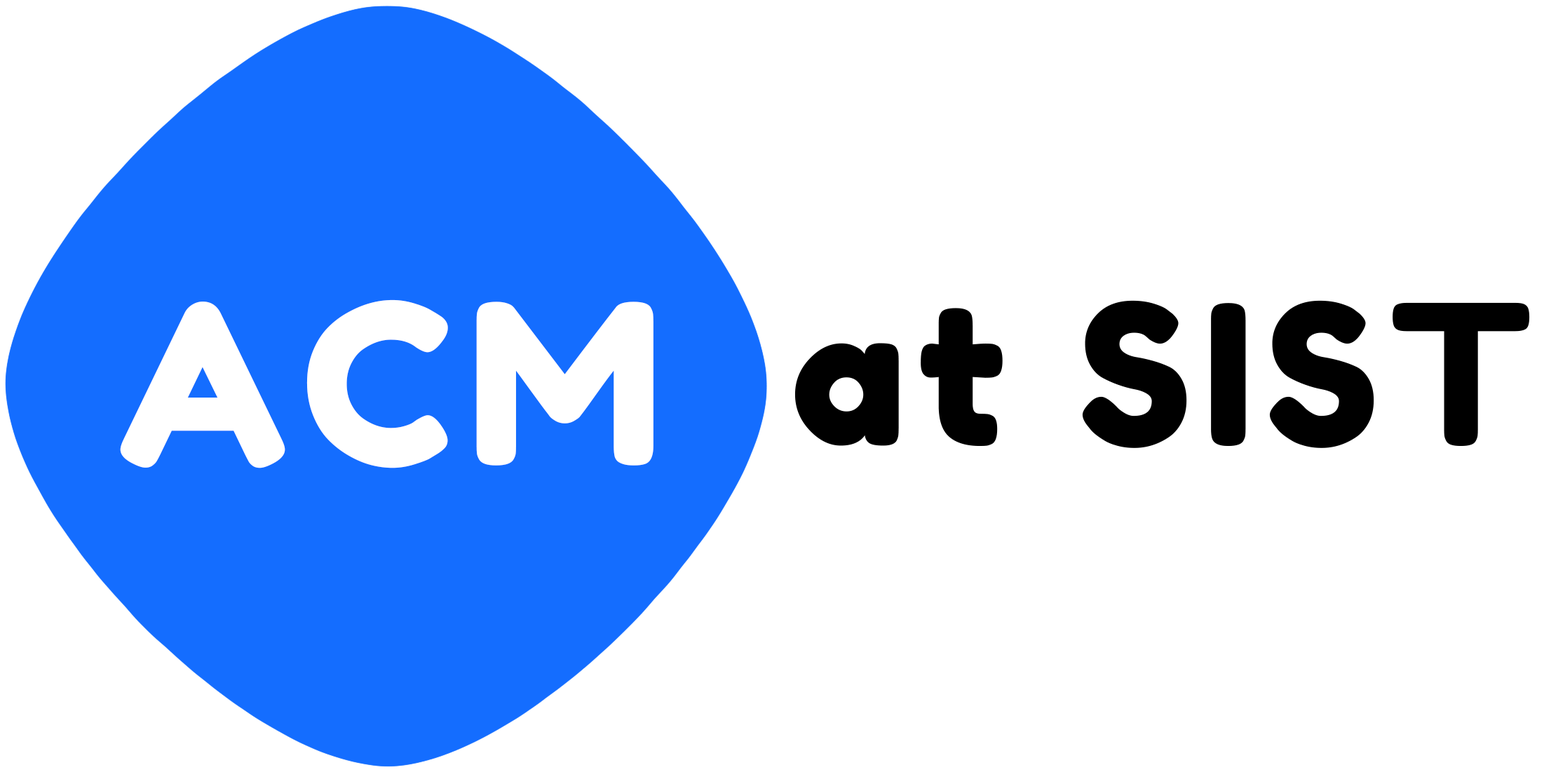
<style>
.page{position:relative;width:1544px;height:772px;background:#ffffff}
.page>*{position:absolute;margin:0}
.t1{font:224px "FredokaOne-Regular";letter-spacing:0.06em;color:#ffffff}
.t2{font:194.8px "FredokaOne-Regular";letter-spacing:0.06em;color:#000000}
</style>
<div class="page">
<p class="t1" style="left:120px;top:299px;width:534px;height:169px">ACM</p>
<p class="t2" style="left:795px;top:300px;width:735px;height:148px">at SIST</p>
</div>
